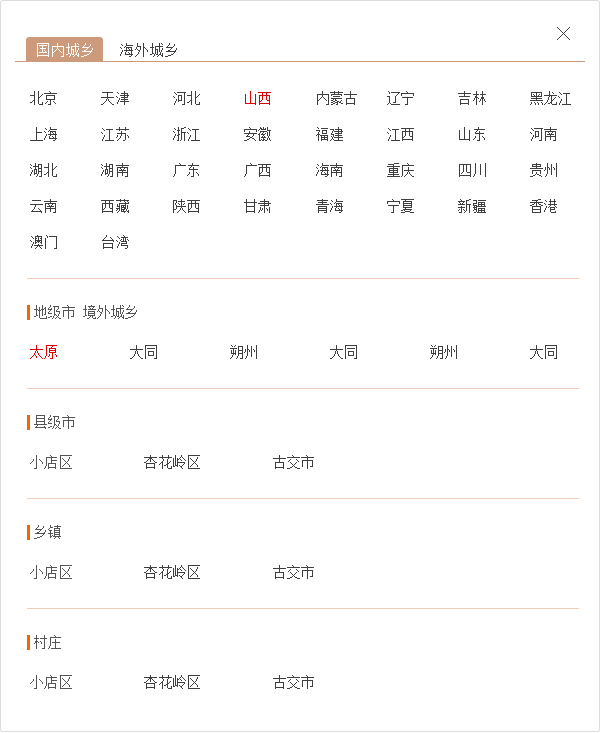
<style>
.page{position:relative;width:600px;height:733px;background:#ffffff}
.page>*{position:absolute;margin:0}
.t1{font:15px "SimSun";color:#3e3e3e}
.t2{font:15px "SimSun";color:#ffffff}
.t3{font:14px/36px "SimSun";letter-spacing:0.02em;color:#3e3e3e}
.t4{font:14px/36px "SimSun";letter-spacing:0.02em;color:#de0101}
.t5{font:14px "SimSun";color:#535454}
.t6{font:14px "SimSun";letter-spacing:0.02em;color:#3e3e3e}
.t7{font:14px "SimSun";letter-spacing:0.02em;color:#de0101}
.t8{font:14px "SimSun";letter-spacing:0.02em;color:#535454}
</style>
<div class="page">
<p class="t1" style="left:557px;top:27px;width:13px;height:13px">╳</p>
<p class="t2" style="left:37px;top:43px;width:140px;height:14px">国内城乡<span class="t1">   海外城乡</span></p>
<p class="t3" style="left:30px;top:91px;width:541px;height:158px">北京　　　天津　　　河北　　　<span class="t4">山西</span>　　　内蒙古　　辽宁　　　吉林　　　黑龙江<br>上海　　　江苏　　　浙江　　　安徽　　　福建　　　江西　　　山东　　　河南<br>湖北　　　湖南　　　广东　　　广西　　　海南　　　重庆　　　四川　　　贵州<br>云南　　　西藏　　　陕西　　　甘肃　　　青海　　　宁夏　　　新疆　　　香港<br>澳门　　　台湾</p>
<p class="t5" style="left:34px;top:305px;width:103px;height:14px">地级市 境外城乡</p>
<p class="t6" style="left:30px;top:345px;width:527px;height:14px"><span class="t7">太原</span>　　　　　大同　　　　　朔州　　　　　大同　　　　　朔州　　　　　大同</p>
<p class="t5" style="left:34px;top:415px;width:41px;height:14px">县级市</p>
<p class="t6" style="left:30px;top:455px;width:284px;height:14px"><span class="t8">小店区</span>　　　　　杏花岭区　　　　　古交市</p>
<p class="t5" style="left:34px;top:525px;width:27px;height:14px">乡镇</p>
<p class="t6" style="left:30px;top:565px;width:284px;height:14px"><span class="t8">小店区</span>　　　　　杏花岭区　　　　　古交市</p>
<p class="t5" style="left:34px;top:635px;width:27px;height:14px">村庄</p>
<p class="t6" style="left:30px;top:675px;width:284px;height:14px"><span class="t8">小店区</span>　　　　　杏花岭区　　　　　古交市</p>
</div>
